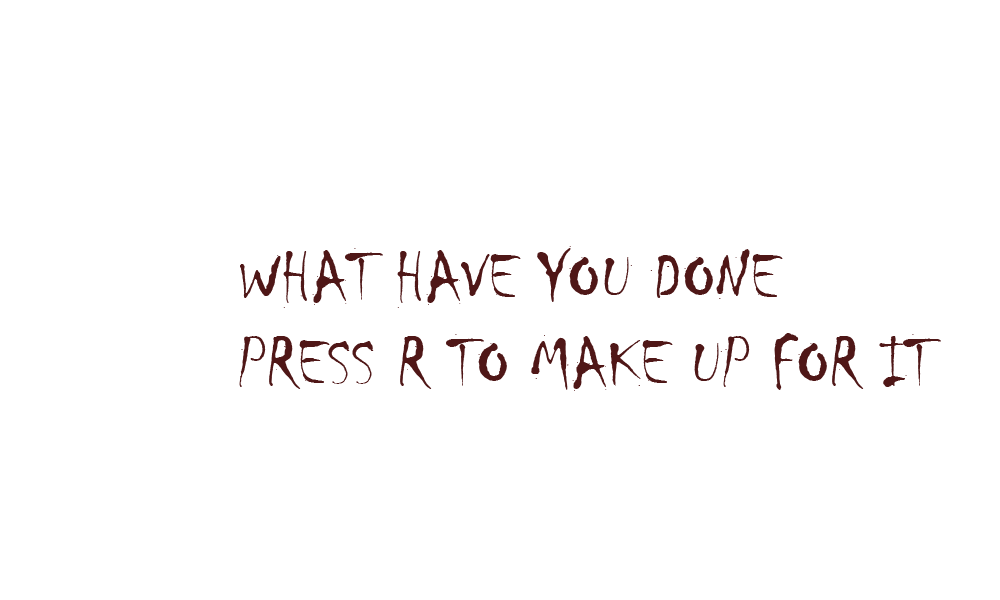
<style>
.page{position:relative;width:1000px;height:600px;background:#ffffff}
.page>*{position:absolute;margin:0}
.t1{font:72px "Chiller-Regular";color:#4f1717}
</style>
<div class="page">
<p class="t1" style="left:239px;top:246px;width:702px;height:145px">WHAT HAVE YOU DONE<br>PRESS R TO MAKE UP FOR IT</p>
</div>
